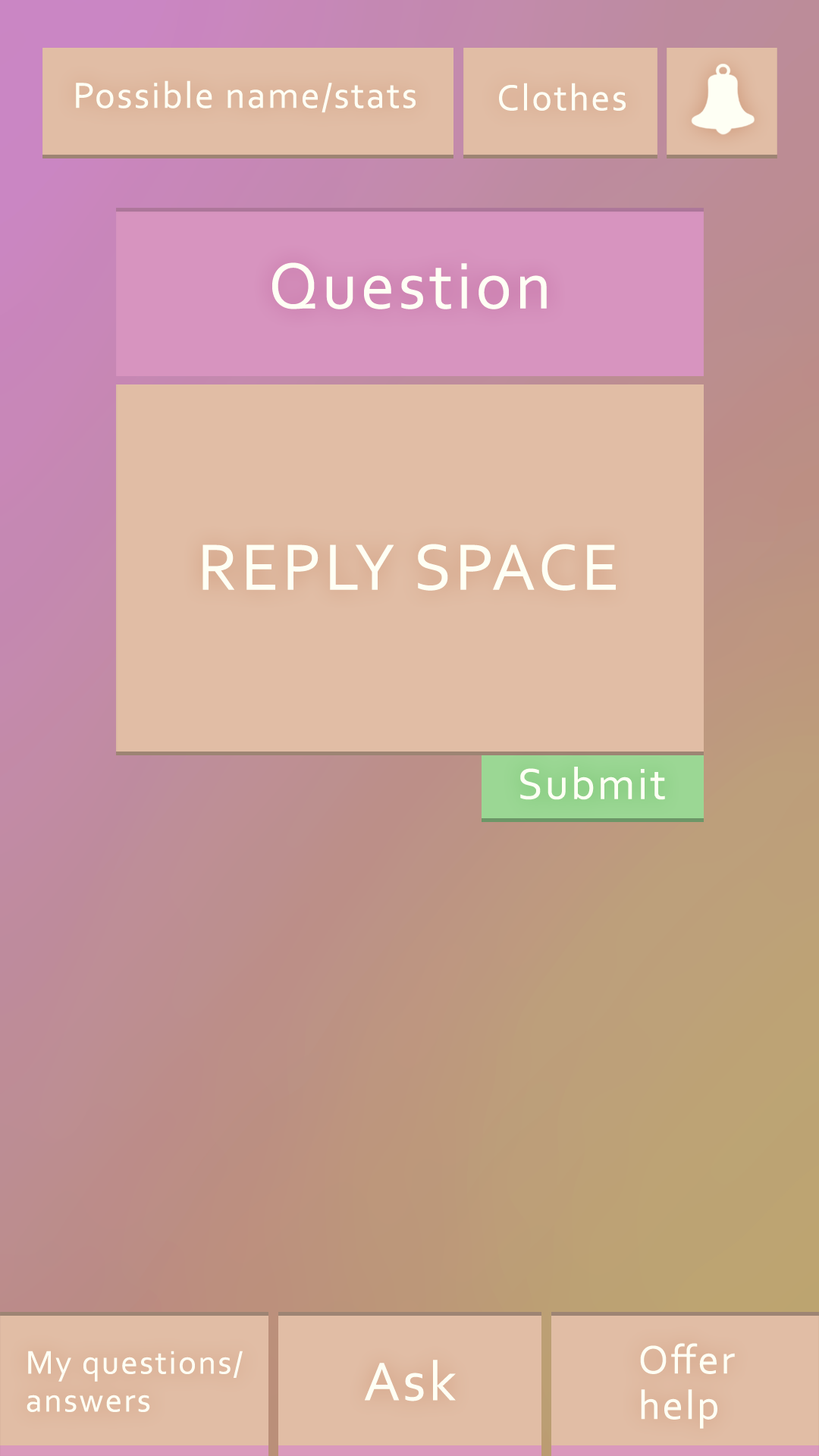
<style>
.page{position:relative;width:819px;height:1456px;background:#e1bda5}
.page>*{position:absolute;margin:0}
.t1{font:37.9px "Corbel";letter-spacing:0.05em;color:#fefff4}
.t2{font:68.2px "Corbel";letter-spacing:0.05em;color:#fefff4}
.t3{font:45.5px "Corbel";letter-spacing:0.05em;color:#fefff4}
.t4{font:41.7px/45.5px "Corbel";letter-spacing:0.05em;color:#fefff4}
.t5{font:34.1px/37.9px "Corbel";letter-spacing:0.05em;color:#fefff4}
.t6{font:56.9px "Corbel";letter-spacing:0.05em;color:#fefff4}
</style>
<div class="page">
<p class="t1" style="left:76px;top:80px;width:340px;height:33px">Possible name/stats</p>
<p class="t1" style="left:499px;top:83px;width:127px;height:28px">Clothes</p>
<p class="t2" style="left:272px;top:262px;width:275px;height:47px">Question</p>
<p class="t2" style="left:202px;top:544px;width:414px;height:47px">REPLY SPACE</p>
<p class="t3" style="left:520px;top:767px;width:145px;height:33px">Submit</p>
<p class="t4" style="left:640px;top:1343px;width:95px;height:86px">Offer<br>help</p>
<p class="t5" style="left:27px;top:1351px;width:216px;height:61px">My questions/<br>answers</p>
<p class="t6" style="left:365px;top:1360px;width:91px;height:41px">Ask</p>
</div>
